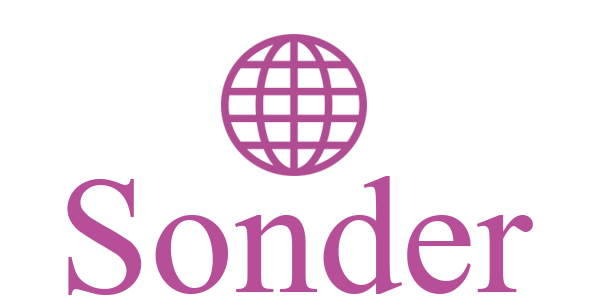
<style>
.page{position:relative;width:600px;height:300px;background:#ffffff}
.page>*{position:absolute;margin:0}
.t1{font:250px "Microsoft-Himalaya";color:#b64f98}
</style>
<div class="page">
<p class="t1" style="left:67px;top:176px;width:466px;height:119px">Sonder</p>
</div>
